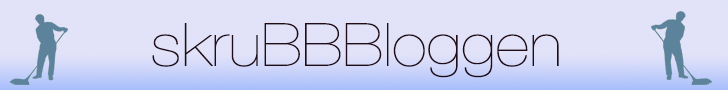
<style>
.page{position:relative;width:728px;height:90px;background:#e2e2f9}
.page>*{position:absolute;margin:0}
.t1{font:59.8px "HelveticaNeue-UltraLight";color:#200b16;scale:1.11 1}
</style>
<div class="page">
<p class="t1" style="left:152px;top:23px;width:407px;height:55px">skruBBBloggen</p>
</div>
